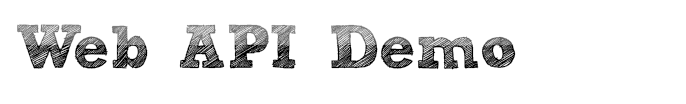
<style>
.page{position:relative;width:686px;height:104px;background:#ffffff}
.page>*{position:absolute;margin:0}
.t1{font:61.3px "freeversionSketchBlock-Bold";letter-spacing:-0.01em}
.t2{font:61.3px "freeversionSketchBlock-Bold";letter-spacing:-0.15em}
</style>
<div class="page">
<p class="t1" style="left:17px;top:24px;width:499px;height:46px"><span class="t2">W</span>eb API Demo</p>
</div>
